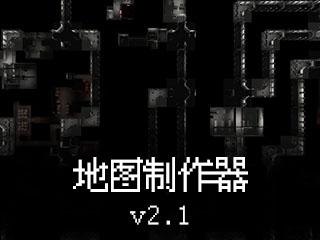
<style>
.page{position:relative;width:320px;height:240px;background:#000000}
.page>*{position:absolute;margin:0}
.t1{font:35px "VonwaonBitmap-12px";color:#ffffff}
</style>
<div class="page">
<p class="t1" style="left:73px;top:157px;width:175px;height:35px">地图制作器</p>
</div>
